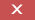
<style>
.page{position:relative;width:35px;height:20px;background:#c75050}
.page>*{position:absolute;margin:0}
.t1{font:18px "ArialMT";color:#ffffff;scale:1.3 1}
</style>
<div class="page">
<p class="t1" style="left:11px;top:4px;width:12px;height:10px">x</p>
</div>
